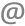
<style>
.page{position:relative;width:25px;height:26px;background:#ffffff}
.page>*{position:absolute;margin:0}
.t1{font:26.7px "LGSmartLight-SemiBold";color:#808080}
</style>
<div class="page">
<p class="t1" style="left:1px;top:2px;width:24px;height:23px">@</p>
</div>
